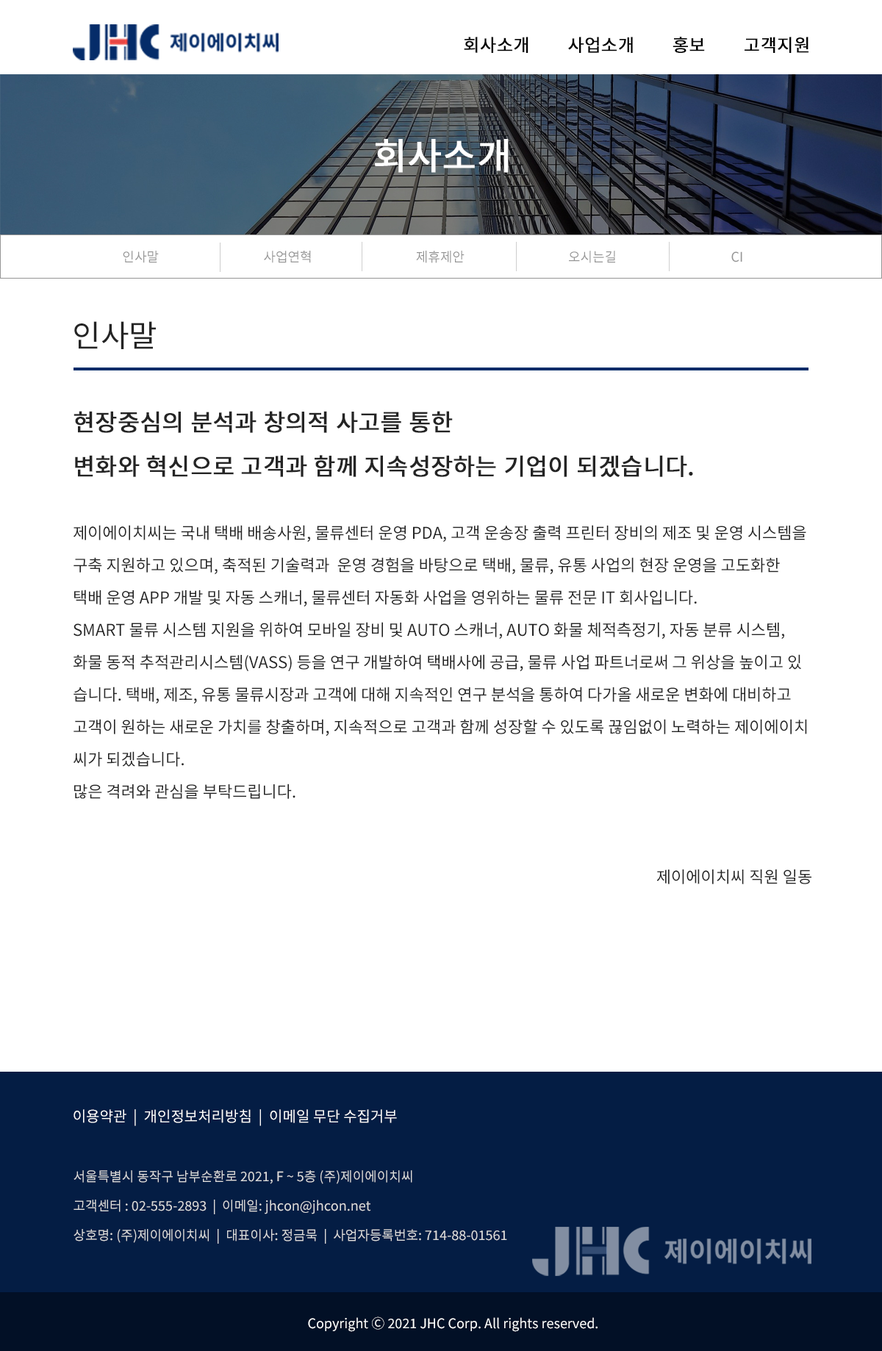
<style>
.page{position:relative;width:882px;height:1351px;background:#ffffff}
.page>*{position:absolute;margin:0}
.t1{font:17.6px "NotoSansKR-Regular";color:#000000;font-weight:bold}
.t2{font:36.8px "NotoSansKR-Regular";color:#ffffff;font-weight:bold}
.t3{font:13.2px "NotoSansKR-Regular";color:#959595}
.t4{font:30.9px "NotoSansKR-Regular";color:#242424}
.t5{font:23.5px/44.1px "NotoSansKR-Regular";color:#242424;font-weight:bold}
.t6{font:16.2px/32.4px "NotoSansKR-Regular";color:#242424}
.t7{font:16.2px "NotoSansKR-Regular";color:#242424}
.t8{font:14.7px "NotoSansKR-Regular";color:#ffffff}
.t9{font:13.2px/29.4px "NotoSansKR-Regular";color:#dddddd}
.t10{font:13.2px "NotoSansKR-Regular";color:#ffffff}
</style>
<div class="page">
<p class="t1" style="left:464px;top:37px;width:65px;height:16px">회사소개</p>
<p class="t1" style="left:568px;top:37px;width:65px;height:16px">사업소개</p>
<p class="t1" style="left:673px;top:37px;width:32px;height:16px">홍보</p>
<p class="t1" style="left:745px;top:37px;width:64px;height:16px">고객지원</p>
<p class="t2" style="left:375px;top:139px;width:134px;height:34px">회사소개</p>
<p class="t3" style="left:123px;top:251px;width:36px;height:12px">인사말</p>
<p class="t3" style="left:264px;top:251px;width:47px;height:12px">사업연혁</p>
<p class="t3" style="left:416px;top:251px;width:49px;height:12px">제휴제안</p>
<p class="t3" style="left:569px;top:251px;width:46px;height:12px">오시는길</p>
<p class="t3" style="left:732px;top:251px;width:11px;height:11px">CI</p>
<p class="t4" style="left:74px;top:321px;width:82px;height:28px">인사말</p>
<p class="t5" style="left:74px;top:411px;width:619px;height:66px">현장중심의 분석과 창의적 사고를 통한 <br>변화와 혁신으로 고객과 함께 지속성장하는 기업이 되겠습니다.</p>
<p class="t6" style="left:74px;top:525px;width:733px;height:274px">제이에이치씨는 국내 택배 배송사원, 물류센터 운영 PDA, 고객 운송장 출력 프린터 장비의 제조 및 운영 시스템을<br>구축 지원하고 있으며, 축적된 기술력과  운영 경험을 바탕으로 택배, 물류, 유통 사업의 현장 운영을 고도화한<br>택배 운영 APP 개발 및 자동 스캐너, 물류센터 자동화 사업을 영위하는 물류 전문 IT 회사입니다.<br>SMART 물류 시스템 지원을 위하여 모바일 장비 및 AUTO 스캐너, AUTO 화물 체적측정기, 자동 분류 시스템,<br>화물 동적 추적관리시스템(VASS) 등을 연구 개발하여 택배사에 공급, 물류 사업 파트너로써 그 위상을 높이고 있<br>습니다. 택배, 제조, 유통 물류시장과 고객에 대해 지속적인 연구 분석을 통하여 다가올 새로운 변화에 대비하고<br>고객이 원하는 새로운 가치를 창출하며, 지속적으로 고객과 함께 성장할 수 있도록 끊임없이 노력하는 제이에이치<br>씨가 되겠습니다.<br>많은 격려와 관심을 부탁드립니다.</p>
<p class="t7" style="left:657px;top:869px;width:155px;height:16px">제이에이치씨 직원 일동</p>
<p class="t8" style="left:74px;top:1110px;width:323px;height:16px">이용약관  |  개인정보처리방침  |  이메일 무단 수집거부</p>
<p class="t9" style="left:74px;top:1171px;width:433px;height:73px">서울특별시 동작구 남부순환로 2021, F ~ 5층 (주)제이에이치씨<br>고객센터 : 02-555-2893  |  이메일: jhcon@jhcon.net<br>상호명: (주)제이에이치씨  |  대표이사: 정금묵  |  사업자등록번호: 714-88-01561</p>
<p class="t10" style="left:308px;top:1317px;width:290px;height:15px">Copyright Ⓒ 2021 JHC Corp. All rights reserved.</p>
</div>
